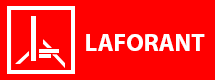
<style>
.page{position:relative;width:215px;height:80px;background:#ff0000}
.page>*{position:absolute;margin:0}
.t1{font:24.3px "MyriadPro-Bold";color:#ffffff}
</style>
<div class="page">
<p class="t1" style="left:86px;top:34px;width:119px;height:17px">LAFORANT</p>
</div>
